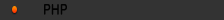
<style>
.page{position:relative;width:224px;height:20px;background:#333333}
.page>*{position:absolute;margin:0}
.t1{font:14.9px "ArialRoundedMTBold";color:#030303;scale:0.78 1}
</style>
<div class="page">
<p class="t1" style="left:44px;top:4px;width:23px;height:11px">PHP</p>
</div>
